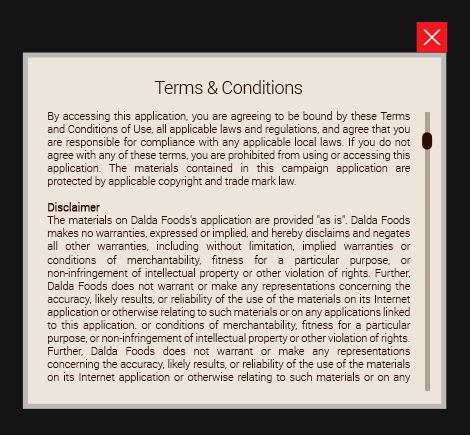
<style>
.page{position:relative;width:470px;height:435px;background:#ede4da}
.page>*{position:absolute;margin:0}
.t1{font:10.9px "Roboto-Light";letter-spacing:-0.01em;color:#2b0e00}
.t2{font:18.1px "Roboto-Light";letter-spacing:-0.025em;color:#2b0e00}
.t3{font:10.9px "Roboto-Light";letter-spacing:-0.01em;color:#2b0e00;font-weight:bold}
</style>
<div class="page">
<p class="t1" style="left:47px;top:80px;width:364px;height:303px;text-align:center"><span class="t2">Terms &amp; Conditions<br><br></span>By accessing this application, you are agreeing to be bound by these Terms and Conditions of Use, all applicable laws and regulations, and agree that you are responsible for compliance with any applicable local laws. If you do not agree with any of these terms, you are prohibited from using or accessing this application. The materials contained in this campaign application are protected by applicable copyright and trade mark law.<br><br><span class="t3">Disclaimer<br></span>The materials on Dalda Foods's application are provided "as is". Dalda Foods makes no warranties, expressed or implied, and hereby disclaims and negates all other warranties, including without limitation, implied warranties or conditions of merchantability, fitness for a particular purpose, or non-infringement of intellectual property or other violation of rights. Further, Dalda Foods does not warrant or make any representations concerning the accuracy, likely results, or reliability of the use of the materials on its Internet application or otherwise relating to such materials or on any applications linked to this application. or conditions of merchantability, fitness for a particular purpose, or non-infringement of intellectual property or other violation of rights. Further, Dalda Foods does not warrant or make any representations concerning the accuracy, likely results, or reliability of the use of the materials on its Internet application or otherwise relating to such materials or on any applications linked to this application.</p>
</div>
